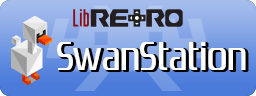
<style>
.page{position:relative;width:256px;height:96px}
.page>*{position:absolute;margin:0}
.t1{font:48px "Zrnic";color:#ffffff}
</style>
<div class="page">
<p class="t1" style="left:57px;top:42px;width:189px;height:28px">SwanStation</p>
</div>
